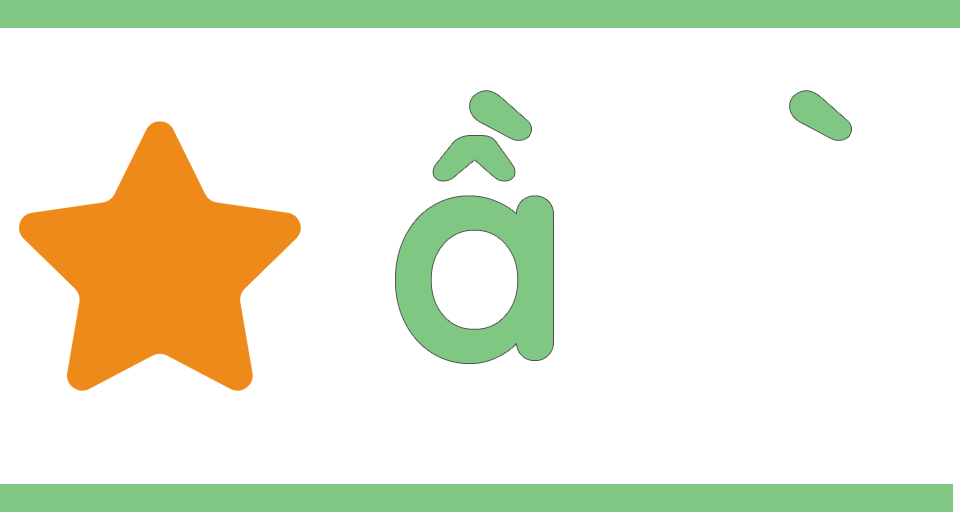
<style>
.page{position:relative;width:960px;height:512px;background:#ffffff}
.page>*{position:absolute;margin:0}
.t1{font:300px "Quicksand-Bold";color:#81c784}
</style>
<div class="page">
<p class="t1" style="left:396px;top:91px;width:157px;height:272px">ầ</p>
</div>
